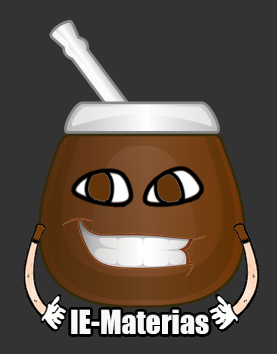
<style>
.page{position:relative;width:277px;height:354px;background:#333333}
.page>*{position:absolute;margin:0}
.t1{font:30px "Impact";color:#f8f8f8}
</style>
<div class="page">
<p class="t1" style="left:71px;top:310px;width:138px;height:24px">IE-Materias</p>
</div>
